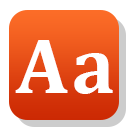
<style>
.page{position:relative;width:128px;height:128px;background:#ffffff}
.page>*{position:absolute;margin:0}
.t1{font:80px "Cambria-Bold";letter-spacing:0.05em;color:#ffffff}
</style>
<div class="page">
<p class="t1" style="left:15px;top:40px;width:98px;height:54px">Aa</p>
</div>
